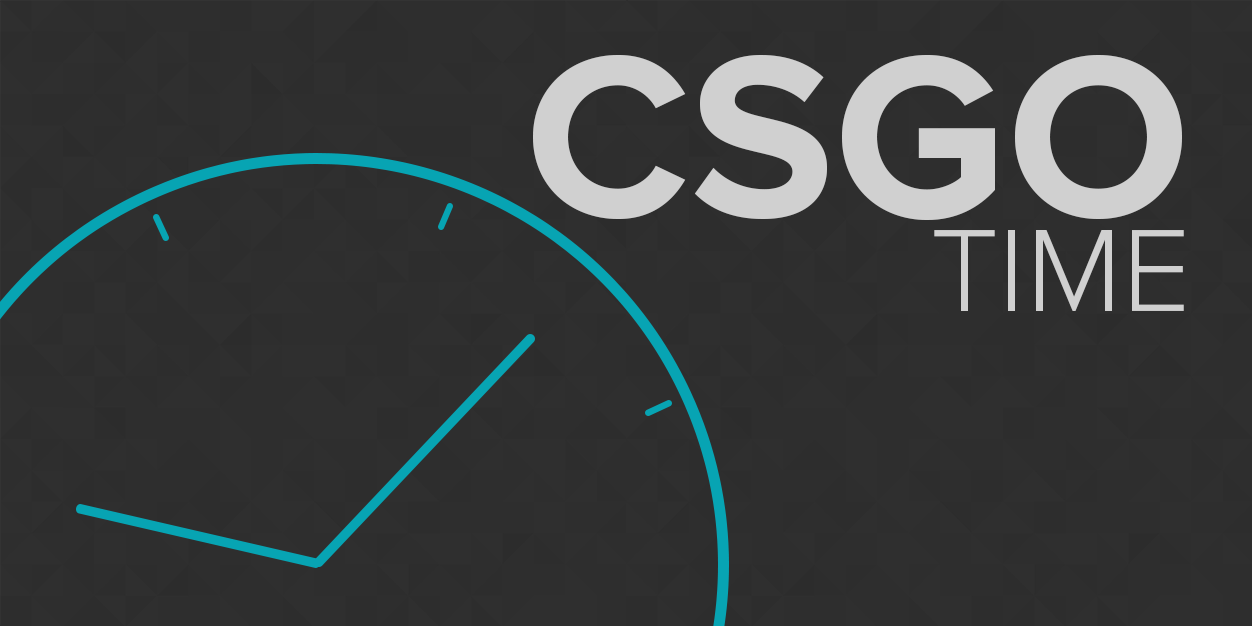
<style>
.page{position:relative;width:1252px;height:626px;background:#2e2e2e}
.page>*{position:absolute;margin:0}
.t1{font:240px/94px "ProximaNova-Bold";color:#d0d0d0}
.t2{font:122px/94px "ProximaNova-Light";color:#d0d0d0}
</style>
<div class="page">
<p class="t1" style="left:533px;top:55px;width:651px;height:256px;text-align:right">CSGO<br><span class="t2">TIME</span></p>
</div>
